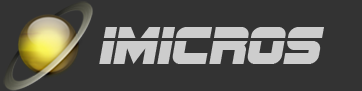
<style>
.page{position:relative;width:362px;height:91px;background:#333333}
.page>*{position:absolute;margin:0}
.t1{font:56px "SFSportsNight";color:#cdcdcd}
</style>
<div class="page">
<p class="t1" style="left:99px;top:27px;width:225px;height:37px">iMicroS</p>
</div>
